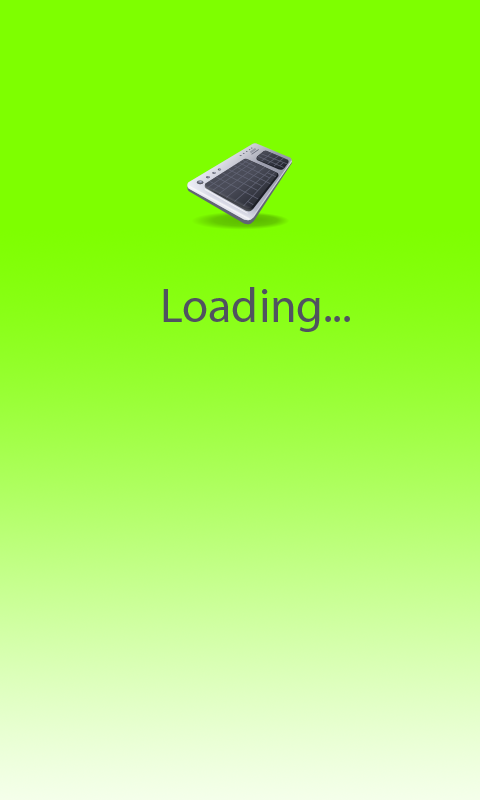
<style>
.page{position:relative;width:480px;height:800px;background:#7eff00}
.page>*{position:absolute;margin:0}
.t1{font:48px "MyriadPro-Regular";color:#505260}
</style>
<div class="page">
<p class="t1" style="left:163px;top:287px;width:187px;height:45px">Loading...</p>
</div>
